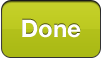
<style>
.page{position:relative;width:102px;height:60px}
.page>*{position:absolute;margin:0}
.t1{font:24px "HelveticaNeue-Bold";color:#ffffff}
</style>
<div class="page">
<p class="t1" style="left:22px;top:19px;width:59px;height:19px">Done</p>
</div>
